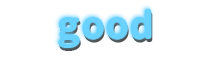
<style>
.page{position:relative;width:210px;height:59px;background:#ffffff}
.page>*{position:absolute;margin:0}
.t1{font:38px "Corporate-Logo-Rounded";color:#6ad2ff}
</style>
<div class="page">
<p class="t1" style="left:58px;top:8px;width:94px;height:40px">good</p>
</div>
